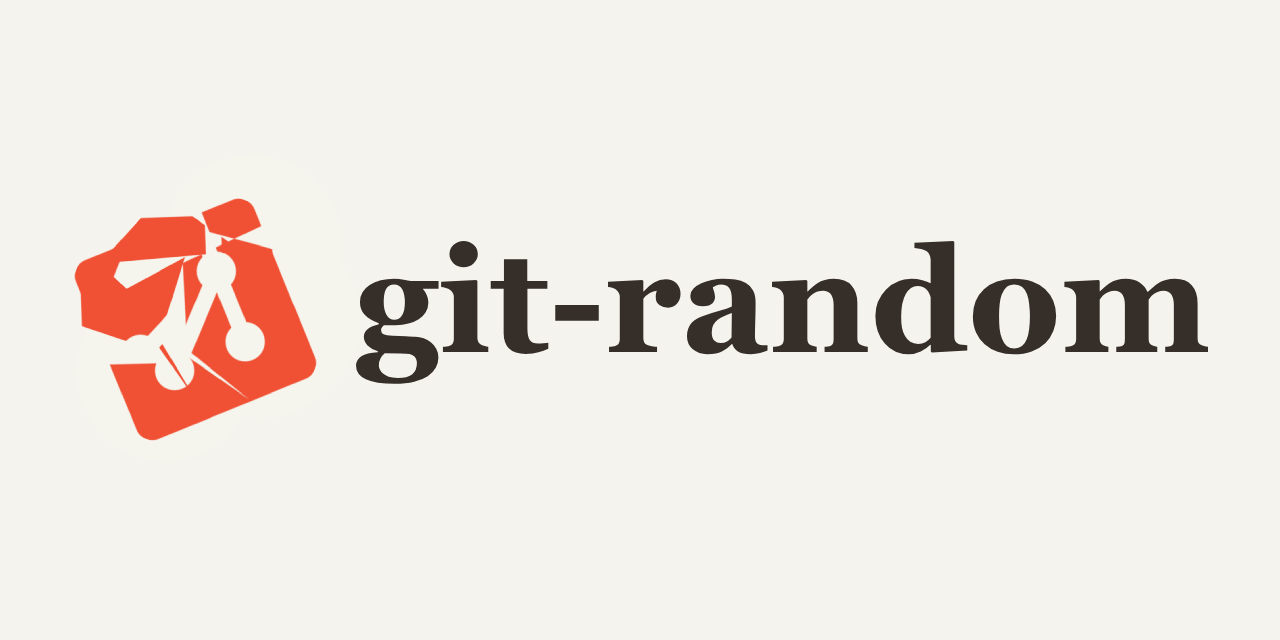
<style>
.page{position:relative;width:1280px;height:640px;background:#f5f3ed}
.page>*{position:absolute;margin:0}
.t1{font:147px "Georgia-Bold";color:#362f29}
.t2{font:147px "Georgia-Bold";color:#f5f4ed}
</style>
<div class="page">
<p class="t1" style="left:356px;top:240px;width:853px;height:144px"><span class="t2">git-</span>random</p>
</div>
